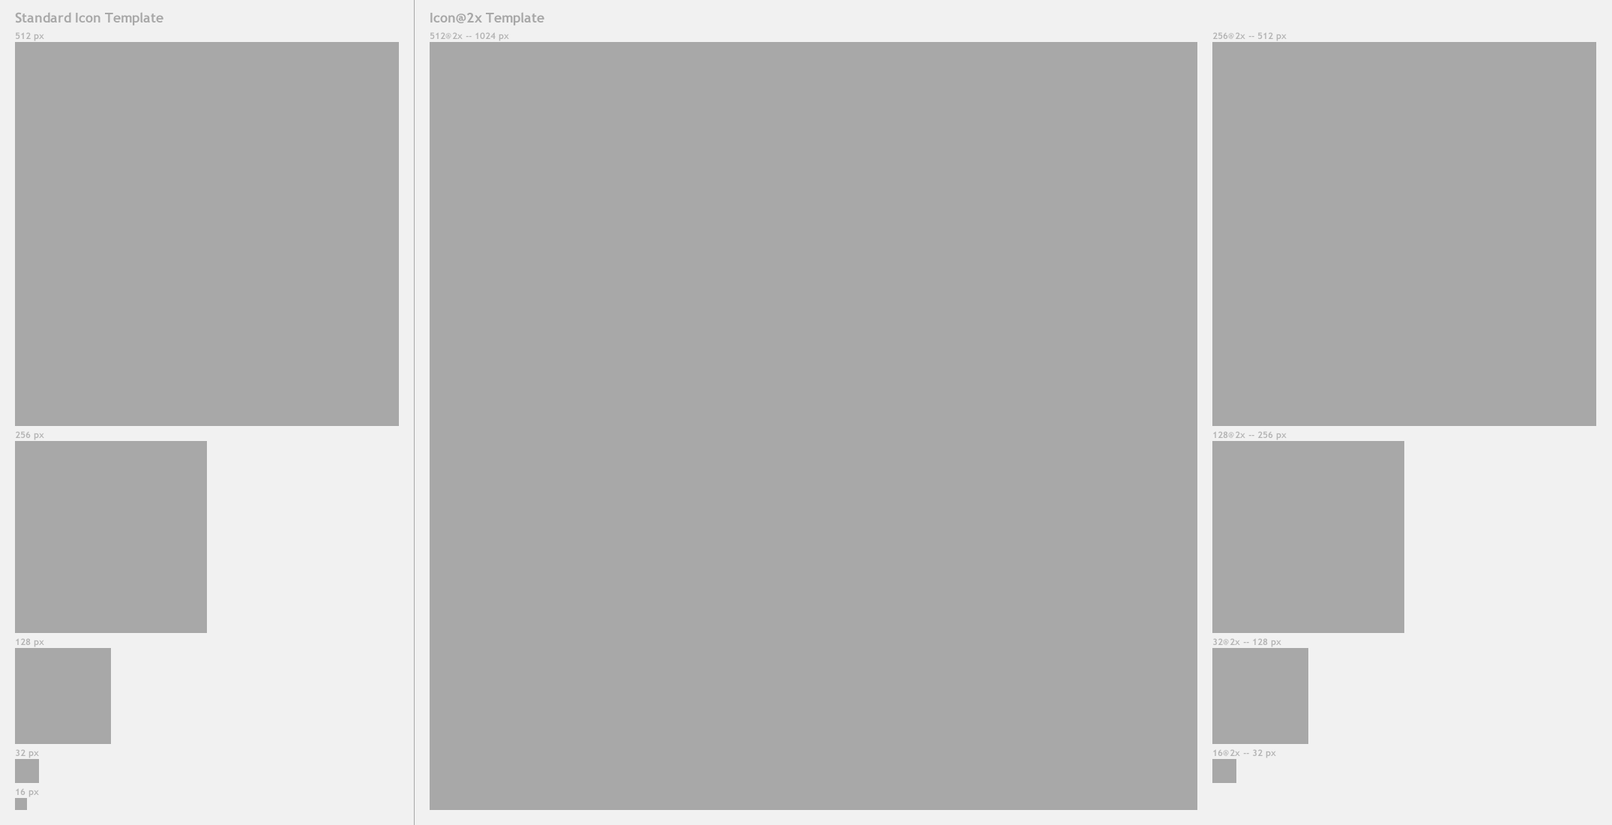
<style>
.page{position:relative;width:1612px;height:825px;background:#a8a8a8}
.page>*{position:absolute;margin:0}
.t1{font:13.5px "TrebuchetMS-Bold";color:#a8a8a8}
.t2{font:13.5px "TrebuchetMS-Bold";color:#a7a7a7}
.t3{font:9px "TrebuchetMS-Bold";color:#b4b4b4}
</style>
<div class="page">
<p class="t1" style="left:15px;top:12px;width:149px;height:14px">Standard Icon Template</p>
<p class="t2" style="left:430px;top:12px;width:114px;height:14px">Icon@2x Template</p>
<p class="t3" style="left:16px;top:32px;width:28px;height:9px">512 px</p>
<p class="t3" style="left:430px;top:32px;width:79px;height:9px">512@2x -- 1024 px</p>
<p class="t3" style="left:1214px;top:32px;width:73px;height:9px">256@2x -- 512 px</p>
<p class="t3" style="left:16px;top:431px;width:28px;height:9px">256 px</p>
<p class="t3" style="left:1214px;top:431px;width:73px;height:9px">128@2x -- 256 px</p>
<p class="t3" style="left:16px;top:638px;width:28px;height:9px">128 px</p>
<p class="t3" style="left:1214px;top:638px;width:68px;height:9px">32@2x -- 128 px</p>
<p class="t3" style="left:16px;top:749px;width:23px;height:9px">32 px</p>
<p class="t3" style="left:1214px;top:749px;width:62px;height:9px">16@2x -- 32 px</p>
<p class="t3" style="left:16px;top:788px;width:23px;height:9px">16 px</p>
</div>
